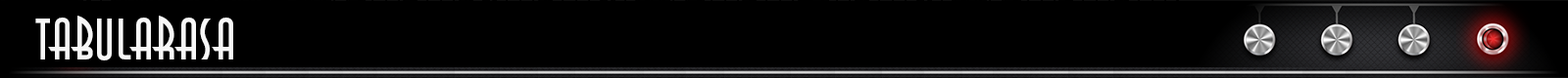
<style>
.page{position:relative;width:1568px;height:78px;background:#000000}
.page>*{position:absolute;margin:0}
.t1{font:58.8px "AnnaStd";color:#f7f7f7}
</style>
<div class="page">
<p class="t1" style="left:35px;top:16px;width:198px;height:45px">TABULARASA</p>
</div>
